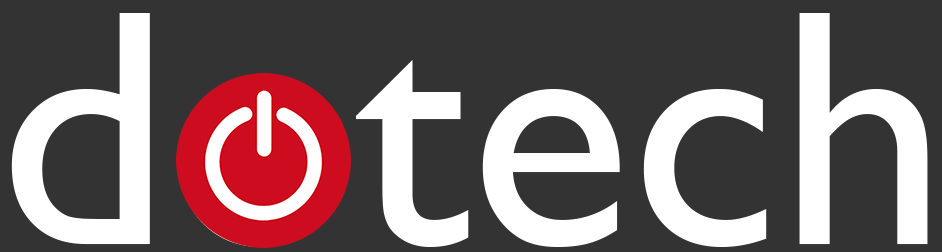
<style>
.page{position:relative;width:942px;height:252px;background:#333333}
.page>*{position:absolute;margin:0}
.t1{font:338.3px "GillSansMT";color:#ffffff}
</style>
<div class="page">
<p class="t1" style="left:11px;top:13px;width:917px;height:234px">dotech</p>
</div>
